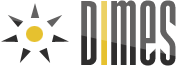
<style>
.page{position:relative;width:177px;height:66px;background:#ffffff}
.page>*{position:absolute;margin:0}
.t1{font:95px "DSNarrow-Extra-condensedMedium"}
</style>
<div class="page">
<p class="t1" style="left:81px;top:0px;width:95px;height:66px">Dimes</p>
</div>
